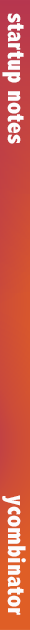
<style>
.page{position:relative;width:30px;height:630px}
.page>*{position:absolute;margin:0}
.t1{font:25.9px "AbadiMT-CondensedExtraBold";color:#fefdfd;scale:0.97 1}
.t2{font:25.9px "AbadiMT-CondensedExtraBold";color:#fdfcfc;scale:0.97 1}
</style>
<div class="page">
<p class="t1" style="left:2px;top:13px;width:22px;height:131px;rotate:90deg">startup notes</p>
<p class="t2" style="left:2px;top:495px;width:24px;height:120px;rotate:90deg">ycombinator</p>
</div>
